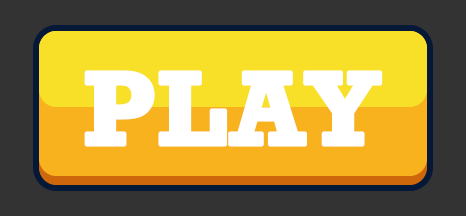
<style>
.page{position:relative;width:466px;height:216px;background:#333333}
.page>*{position:absolute;margin:0}
.t1{font:108px "Rockwell-Bold";color:#ffffff;text-transform:uppercase;font-weight:bold}
</style>
<div class="page">
<p class="t1" style="left:84px;top:70px;width:299px;height:77px">Play</p>
</div>
